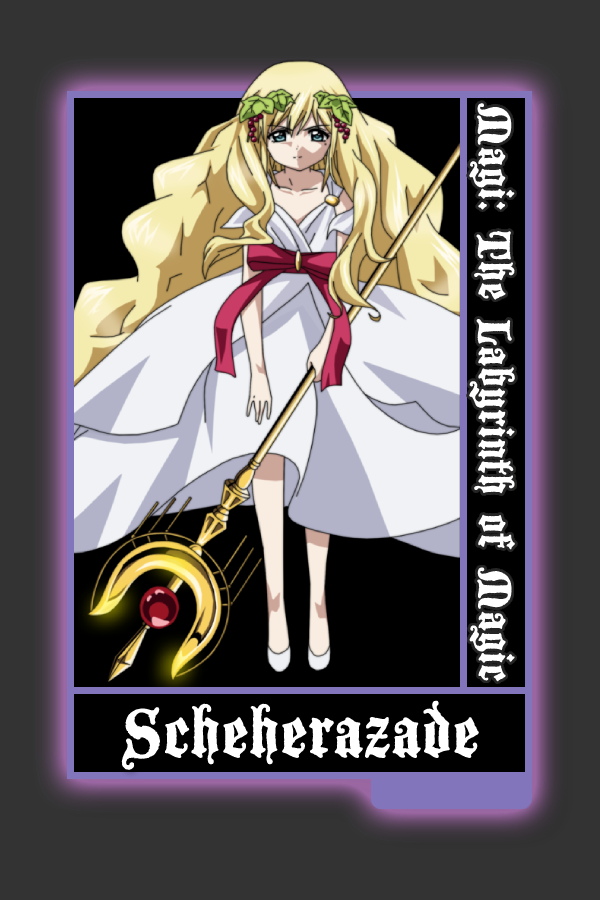
<style>
.page{position:relative;width:600px;height:900px;background:#333333}
.page>*{position:absolute;margin:0}
.t1{font:50px "BlackwoodCastle";color:#ffffff}
.t2{font:75px "BlackwoodCastle";color:#ffffff}
</style>
<div class="page">
<p class="t1" style="left:469px;top:103px;width:46px;height:579px;rotate:90deg">Magi: The Labyrinth of Magic</p>
<p class="t2" style="left:121px;top:700px;width:358px;height:70px">Scheherazade</p>
</div>
